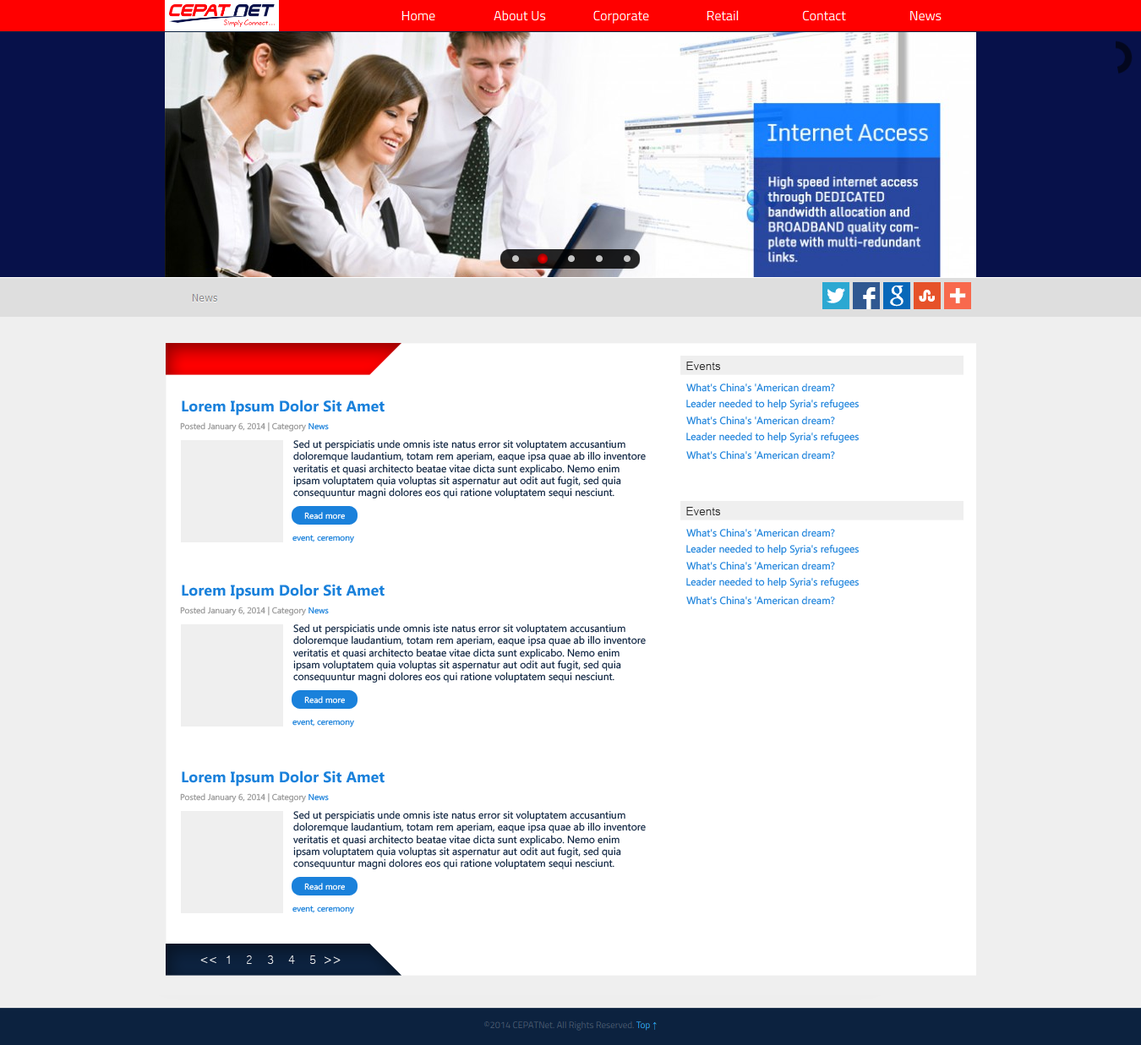
<style>
.page{position:relative;width:1141px;height:1045px;background:#ffffff}
.page>*{position:absolute;margin:0}
.t1{font:15.2px "Microsoft-Yi-Baiti";color:#272727}
.t2{font:10.1px "MicrosoftPhagsPa";color:#1a81db}
.t3{font:15.2px "MicrosoftPhagsPa-Bold";color:#1a81db}
.t4{font:8.5px "MicrosoftPhagsPa";color:#999999}
.t5{font:8.5px "MicrosoftPhagsPa";color:#1a81db}
.t6{font:10.1px "MicrosoftPhagsPa";color:#0c223f}
.t7{font:8.5px "MicrosoftPhagsPa";color:#ffffff}
.t8{font:15.2px "Microsoft-Yi-Baiti";color:#efefef}
</style>
<div class="page">
<p class="t1" style="left:686px;top:362px;width:34px;height:8px">Events</p>
<p class="t2" style="left:686px;top:383px;width:149px;height:9px">What's China's 'American dream?</p>
<p class="t3" style="left:182px;top:400px;width:202px;height:16px">Lorem Ipsum Dolor Sit Amet</p>
<p class="t2" style="left:686px;top:399px;width:173px;height:11px">Leader needed to help Syria's refugees</p>
<p class="t4" style="left:180px;top:423px;width:149px;height:9px">Posted January 6, 2014 | Category <span class="t5">News</span></p>
<p class="t2" style="left:686px;top:416px;width:149px;height:9px">What's China's 'American dream?</p>
<p class="t2" style="left:686px;top:432px;width:173px;height:11px">Leader needed to help Syria's refugees</p>
<p class="t6" style="left:293px;top:439px;width:353px;height:60px">Sed ut perspiciatis unde omnis iste natus error sit voluptatem accusantium doloremque laudantium, totam rem aperiam, eaque ipsa quae ab illo inventore veritatis et quasi architecto beatae vitae dicta sunt explicabo. Nemo enim ipsam voluptatem quia voluptas sit aspernatur aut odit aut fugit, sed quia consequuntur magni dolores eos qui ratione voluptatem sequi nesciunt.</p>
<p class="t2" style="left:686px;top:450px;width:149px;height:10px">What's China's 'American dream?</p>
<p class="t1" style="left:686px;top:507px;width:34px;height:8px">Events</p>
<p class="t7" style="left:304px;top:512px;width:41px;height:8px">Read more</p>
<p class="t2" style="left:686px;top:528px;width:149px;height:9px">What's China's 'American dream?</p>
<p class="t5" style="left:292px;top:535px;width:62px;height:8px">event, ceremony</p>
<p class="t2" style="left:686px;top:544px;width:173px;height:11px">Leader needed to help Syria's refugees</p>
<p class="t2" style="left:686px;top:561px;width:149px;height:9px">What's China's 'American dream?</p>
<p class="t2" style="left:686px;top:577px;width:173px;height:11px">Leader needed to help Syria's refugees</p>
<p class="t3" style="left:182px;top:584px;width:202px;height:16px">Lorem Ipsum Dolor Sit Amet</p>
<p class="t2" style="left:686px;top:596px;width:149px;height:9px">What's China's 'American dream?</p>
<p class="t4" style="left:180px;top:607px;width:149px;height:9px">Posted January 6, 2014 | Category <span class="t5">News</span></p>
<p class="t6" style="left:293px;top:624px;width:353px;height:59px">Sed ut perspiciatis unde omnis iste natus error sit voluptatem accusantium doloremque laudantium, totam rem aperiam, eaque ipsa quae ab illo inventore veritatis et quasi architecto beatae vitae dicta sunt explicabo. Nemo enim ipsam voluptatem quia voluptas sit aspernatur aut odit aut fugit, sed quia consequuntur magni dolores eos qui ratione voluptatem sequi nesciunt.</p>
<p class="t7" style="left:304px;top:696px;width:41px;height:8px">Read more</p>
<p class="t5" style="left:292px;top:719px;width:62px;height:9px">event, ceremony</p>
<p class="t3" style="left:182px;top:771px;width:202px;height:16px">Lorem Ipsum Dolor Sit Amet</p>
<p class="t4" style="left:180px;top:793px;width:149px;height:10px">Posted January 6, 2014 | Category <span class="t5">News</span></p>
<p class="t6" style="left:293px;top:810px;width:353px;height:60px">Sed ut perspiciatis unde omnis iste natus error sit voluptatem accusantium doloremque laudantium, totam rem aperiam, eaque ipsa quae ab illo inventore veritatis et quasi architecto beatae vitae dicta sunt explicabo. Nemo enim ipsam voluptatem quia voluptas sit aspernatur aut odit aut fugit, sed quia consequuntur magni dolores eos qui ratione voluptatem sequi nesciunt.</p>
<p class="t7" style="left:304px;top:883px;width:41px;height:8px">Read more</p>
<p class="t5" style="left:292px;top:906px;width:62px;height:8px">event, ceremony</p>
<p class="t8" style="left:200px;top:956px;width:141px;height:8px">&lt;&lt; 1  2  3  4  5 &gt;&gt;</p>
</div>
